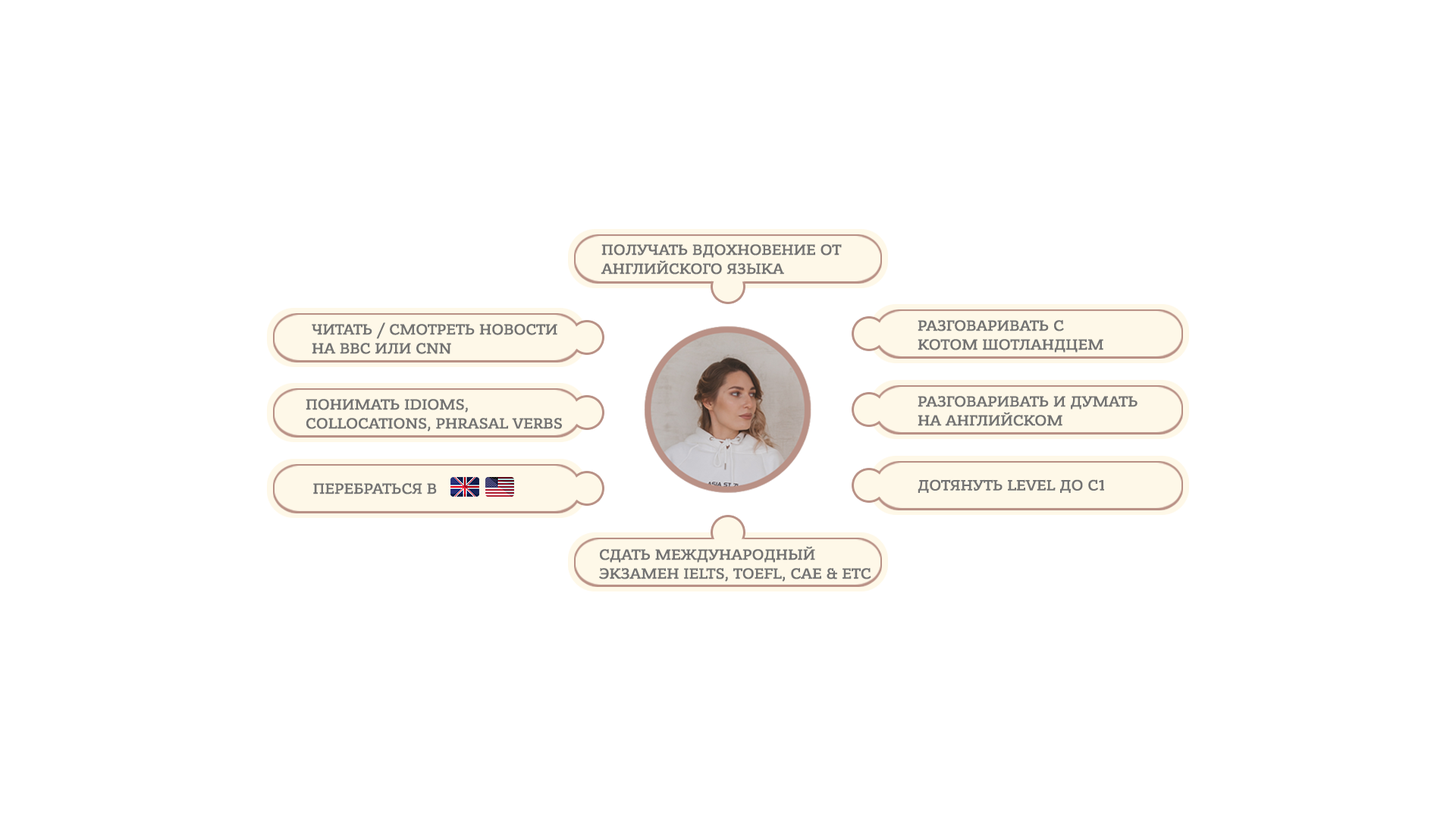
<style>
.page{position:relative;width:1456px;height:819px;background:#ffffff}
.page>*{position:absolute;margin:0}
.t1{font:15.8px "BanderaProMedium";color:#737373}
</style>
<div class="page">
<p class="t1" style="left:601px;top:244px;width:241px;height:31px">ПОЛУЧАТЬ ВДОХНОВЕНИЕ ОТ АНГЛИЙСКОГО ЯЗЫКА</p>
<p class="t1" style="left:312px;top:322px;width:245px;height:32px">ЧИТАТЬ / СМОТРЕТЬ НОВОСТИ <br>НА BBC ИЛИ CNN</p>
<p class="t1" style="left:918px;top:320px;width:185px;height:33px">РАЗГОВАРИВАТЬ С <br>КОТОМ ШОТЛАНДЦЕМ</p>
<p class="t1" style="left:306px;top:399px;width:256px;height:32px">ПОНИМАТЬ IDIOMS, <br>COLLOCATIONS, PHRASAL VERBS</p>
<p class="t1" style="left:918px;top:396px;width:219px;height:30px">РАЗГОВАРИВАТЬ И ДУМАТЬ<br>НА АНГЛИЙСКОМ</p>
<p class="t1" style="left:313px;top:483px;width:124px;height:11px">ПЕРЕБРАТЬСЯ В</p>
<p class="t1" style="left:918px;top:479px;width:186px;height:14px">ДОТЯНУТЬ LEVEL ДО С1</p>
<p class="t1" style="left:599px;top:546px;width:272px;height:36px">СДАТЬ МЕЖДУНАРОДНЫЙ <br>ЭКЗАМЕН IELTS, TOEFL, CAE &amp; ETC</p>
</div>
